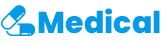
<style>
.page{position:relative;width:162px;height:43px;background:#ffffff}
.page>*{position:absolute;margin:0}
.t1{font:30px "Poppins-ExtraBold";color:#049ae5}
</style>
<div class="page">
<p class="t1" style="left:38px;top:8px;width:122px;height:26px">Medical</p>
</div>
